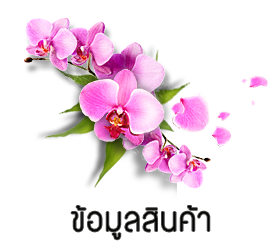
<style>
.page{position:relative;width:280px;height:245px;background:#ffffff}
.page>*{position:absolute;margin:0}
.t1{font:30px "BangnaNew";color:#020200}
</style>
<div class="page">
<p class="t1" style="left:71px;top:206px;width:139px;height:34px">ข้อมูลสินค้า</p>
</div>
